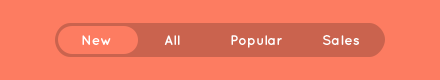
<style>
.page{position:relative;width:440px;height:80px;background:#fd7c61}
.page>*{position:absolute;margin:0}
.t1{font:14px "QuicksandBold-Regular";color:#ffffff}
</style>
<div class="page">
<p class="t1" style="left:82px;top:35px;width:29px;height:10px">New</p>
<p class="t1" style="left:164px;top:35px;width:16px;height:10px">All</p>
<p class="t1" style="left:231px;top:35px;width:51px;height:13px">Popular</p>
<p class="t1" style="left:323px;top:35px;width:36px;height:10px">Sales</p>
</div>
